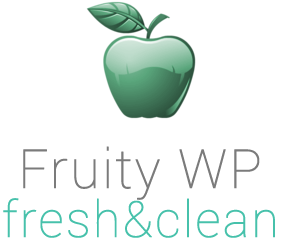
<style>
.page{position:relative;width:282px;height:241px;background:#ffffff}
.page>*{position:absolute;margin:0}
.t1{font:54px "Roboto-Thin";letter-spacing:0.017em;color:#7a7a7a;font-weight:bold}
.t2{font:50px "Roboto-Thin";letter-spacing:0.017em;color:#47c1ab;font-weight:bold}
</style>
<div class="page">
<p class="t1" style="left:23px;top:146px;width:237px;height:54px">Fruity WP</p>
<p class="t2" style="left:3px;top:198px;width:272px;height:40px">fresh&amp;clean</p>
</div>
